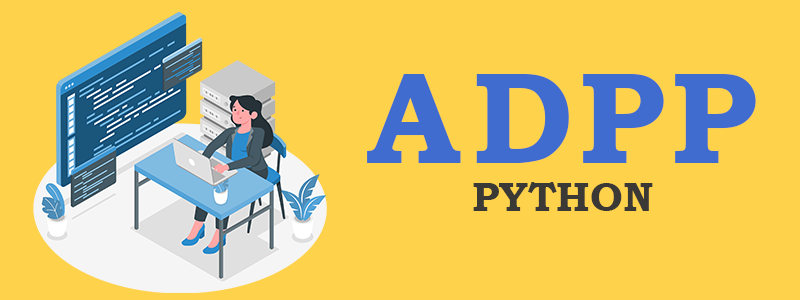
<style>
.page{position:relative;width:800px;height:300px;background:#ffd24c}
.page>*{position:absolute;margin:0}
.t1{font:130px "BookmanOldStyle-Bold";color:#406cd0}
.t2{font:41px "BookmanOldStyle-Bold";color:#3a3936}
</style>
<div class="page">
<p class="t1" style="left:367px;top:74px;width:389px;height:89px">A    D  P  P</p>
<p class="t2" style="left:473px;top:182px;width:180px;height:29px">PYTHON</p>
</div>
